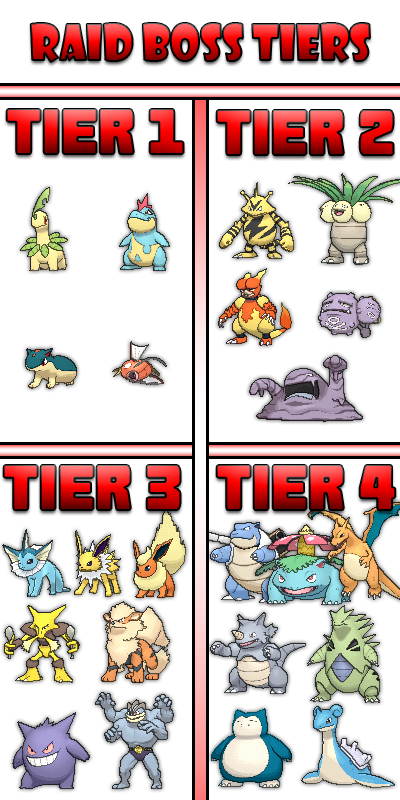
<style>
.page{position:relative;width:400px;height:800px;background:#ffffff}
.page>*{position:absolute;margin:0}
.t1{font:48px "ShowcardGothic-Reg";scale:0.9 1}
.t2{font:60px "Goma-Block"}
</style>
<div class="page">
<p class="t1" style="left:30px;top:23px;width:340px;height:39px">Raid Boss Tiers</p>
<p class="t2" style="left:6px;top:109px;width:178px;height:45px">Tier 1</p>
<p class="t2" style="left:216px;top:110px;width:178px;height:45px">Tier 2</p>
<p class="t2" style="left:3px;top:465px;width:178px;height:45px">Tier 3</p>
<p class="t2" style="left:216px;top:465px;width:180px;height:45px">Tier 4</p>
</div>
